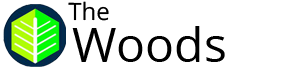
<style>
.page{position:relative;width:300px;height:73px;background:#ffffff}
.page>*{position:absolute;margin:0}
.t1{font:24px "OpenSans-Regular";color:#000000}
.t2{font:48px "OpenSans-Regular";color:#000000}
</style>
<div class="page">
<p class="t1" style="left:68px;top:1px;width:41px;height:20px">The</p>
<p class="t2" style="left:72px;top:26px;width:153px;height:36px">Woods</p>
</div>
